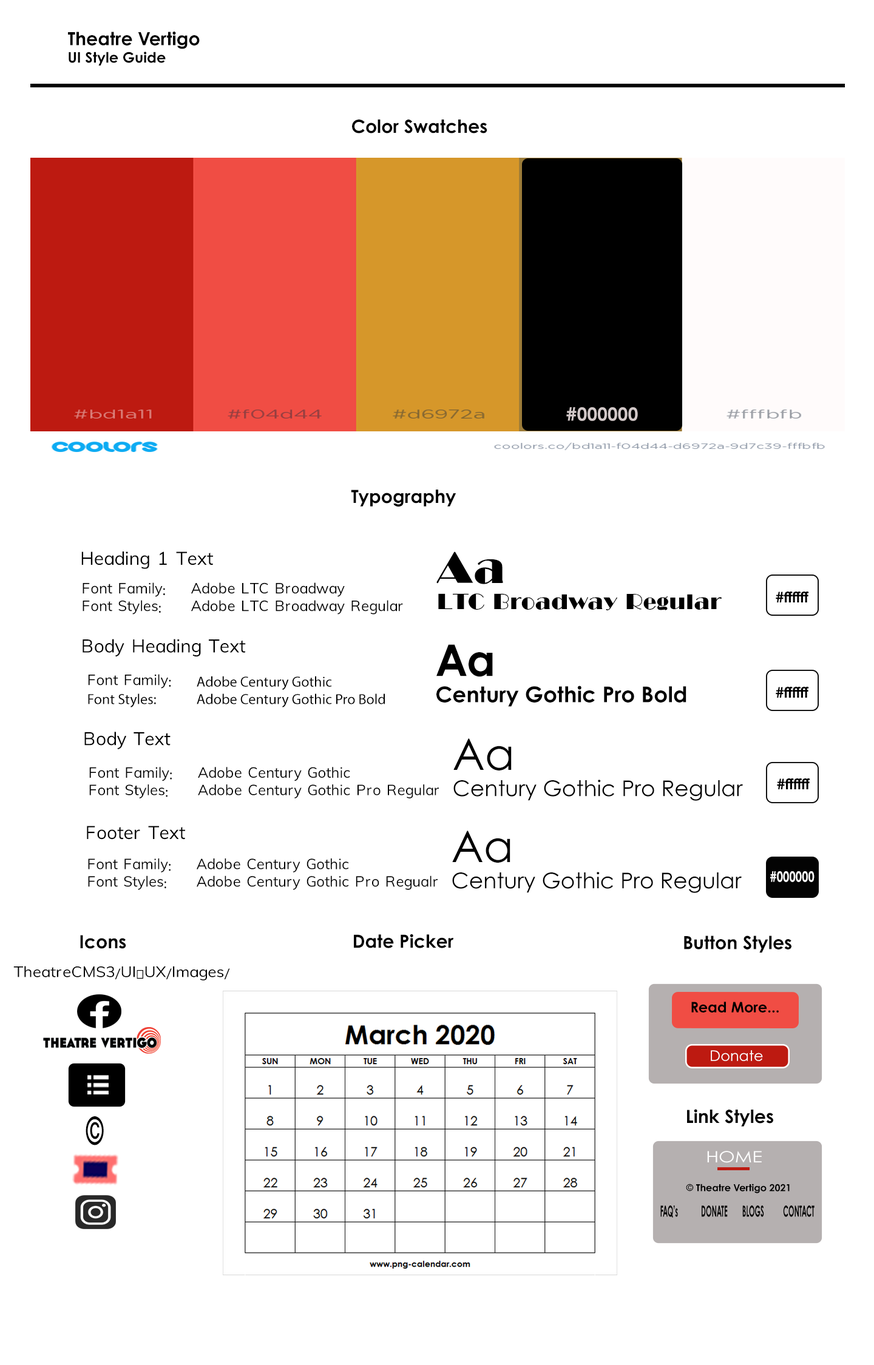
<style>
.page{position:relative;width:874px;height:1365px;background:#ffffff}
.page>*{position:absolute;margin:0}
.t1{font:18.2px "CenturyGothicPro-Bold";color:#000000}
.t2{font:14.6px "CenturyGothicPro-Bold";color:#000000}
.t3{font:18.2px "CenturyGothicPro-Bold";color:#d3c9c9}
.t4{font:21.8px "LTCBroadway-Regular";color:#000000}
.t5{font:43.7px "LTCBroadway-Regular";color:#000000}
.t6{font:21.8px "CenturyGothicPro-Bold";color:#000000}
.t7{font:43.7px "CenturyGothicPro-Bold";color:#000000}
.t8{font:14.6px "MyriadPro-Regular";color:#000000}
.t9{font:14.6px "FontAwesome5Brands-Regular";color:#000000}
.t10{font:21.8px "CenturyGothicPro";color:#000000}
.t11{font:43.7px "CenturyGothicPro";color:#000000}
.t12{font:14.6px "CenturyGothicPro-Bold";color:#ffffff;scale:0.77 1}
.t13{font:14.6px "CenturyGothicPro";color:#ffffff}
.t14{font:18.2px "CenturyGothicPro-Bold";color:#030303}
.t15{font:40.2px "CenturyGothicPro-Bold";color:#000000;scale:0.61 1}
.t16{font:15.6px "CenturyGothicPro";color:#ffffff;scale:1.2 1}
.t17{font:9.7px "CenturyGothicPro-Bold";color:#000000}
.t18{font:15.4px "CenturyGothicPro-Bold";color:#000000;scale:0.44 1}
</style>
<div class="page">
<p class="t1" style="left:68px;top:32px;width:132px;height:34px">Theatre Vertigo<br><span class="t2">UI Style Guide</span></p>
<p class="t1" style="left:352px;top:120px;width:135px;height:13px">Color Swatches</p>
<p class="t3" style="left:566px;top:407px;width:72px;height:14px">#000000</p>
<p class="t1" style="left:351px;top:490px;width:105px;height:17px">Typography</p>
<p class="t4" style="left:436px;top:551px;width:285px;height:59px"><span class="t5">Aa<br></span>LTC Broadway Regular</p>
<p class="t2" style="left:775px;top:591px;width:34px;height:11px">#ffffff</p>
<p class="t6" style="left:436px;top:644px;width:250px;height:63px"><span class="t7">Aa<br></span>Century Gothic Pro Bold</p>
<p class="t8" style="left:88px;top:674px;width:297px;height:33px"><span class="t9">Font Family</span>:  Adobe Century Gothic<br>Font Styles:  Adobe Century Gothic Pro Bold</p>
<p class="t2" style="left:775px;top:687px;width:34px;height:11px">#ffffff</p>
<p class="t10" style="left:453px;top:738px;width:290px;height:63px"><span class="t11">Aa<br></span>Century Gothic Pro Regular</p>
<p class="t2" style="left:777px;top:778px;width:33px;height:11px">#ffffff</p>
<p class="t10" style="left:452px;top:831px;width:289px;height:62px"><span class="t11">Aa<br></span>Century Gothic Pro Regular</p>
<p class="t12" style="left:770px;top:871px;width:44px;height:11px">#000000</p>
<p class="t1" style="left:80px;top:935px;width:46px;height:14px">Icons</p>
<p class="t1" style="left:354px;top:934px;width:100px;height:14px">Date Picker</p>
<p class="t1" style="left:684px;top:935px;width:107px;height:18px">Button Styles</p>
<p class="t2" style="left:691px;top:1002px;width:87px;height:11px">Read More...</p>
<p class="t13" style="left:710px;top:1050px;width:53px;height:11px">Donate</p>
<p class="t14" style="left:687px;top:1109px;width:86px;height:18px">Link Styles</p>
<p class="t15" style="left:86px;top:1116px;width:18px;height:29px">©</p>
<p class="t16" style="left:707px;top:1151px;width:54px;height:12px">HOME</p>
<p class="t17" style="left:686px;top:1184px;width:103px;height:9px">© Theatre Vertigo 2021</p>
<p class="t18" style="left:660px;top:1205px;width:154px;height:13px">FAQ’s  DONATE  BLOGS  CONTACT</p>
</div>
